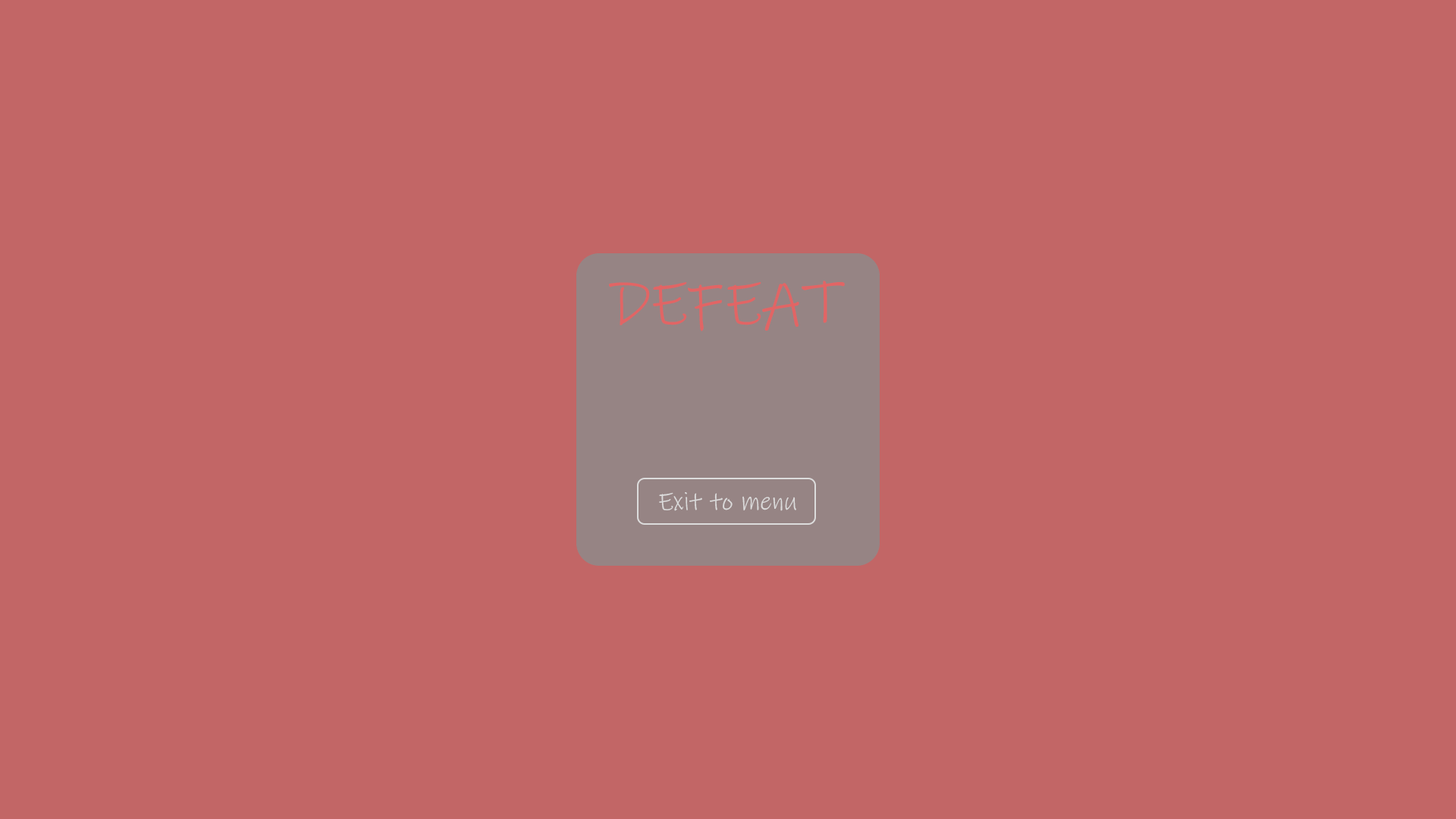
<style>
.page{position:relative;width:1456px;height:819px;background:#c26666}
.page>*{position:absolute;margin:0}
.t1{font:62.9px "InkFree";color:#e16565}
.t2{font:25.8px "InkFree";color:#dcdcdc}
</style>
<div class="page">
<p class="t1" style="left:609px;top:281px;width:236px;height:50px">DEFEAT</p>
<p class="t2" style="left:659px;top:492px;width:137px;height:19px">Exit to menu</p>
</div>
